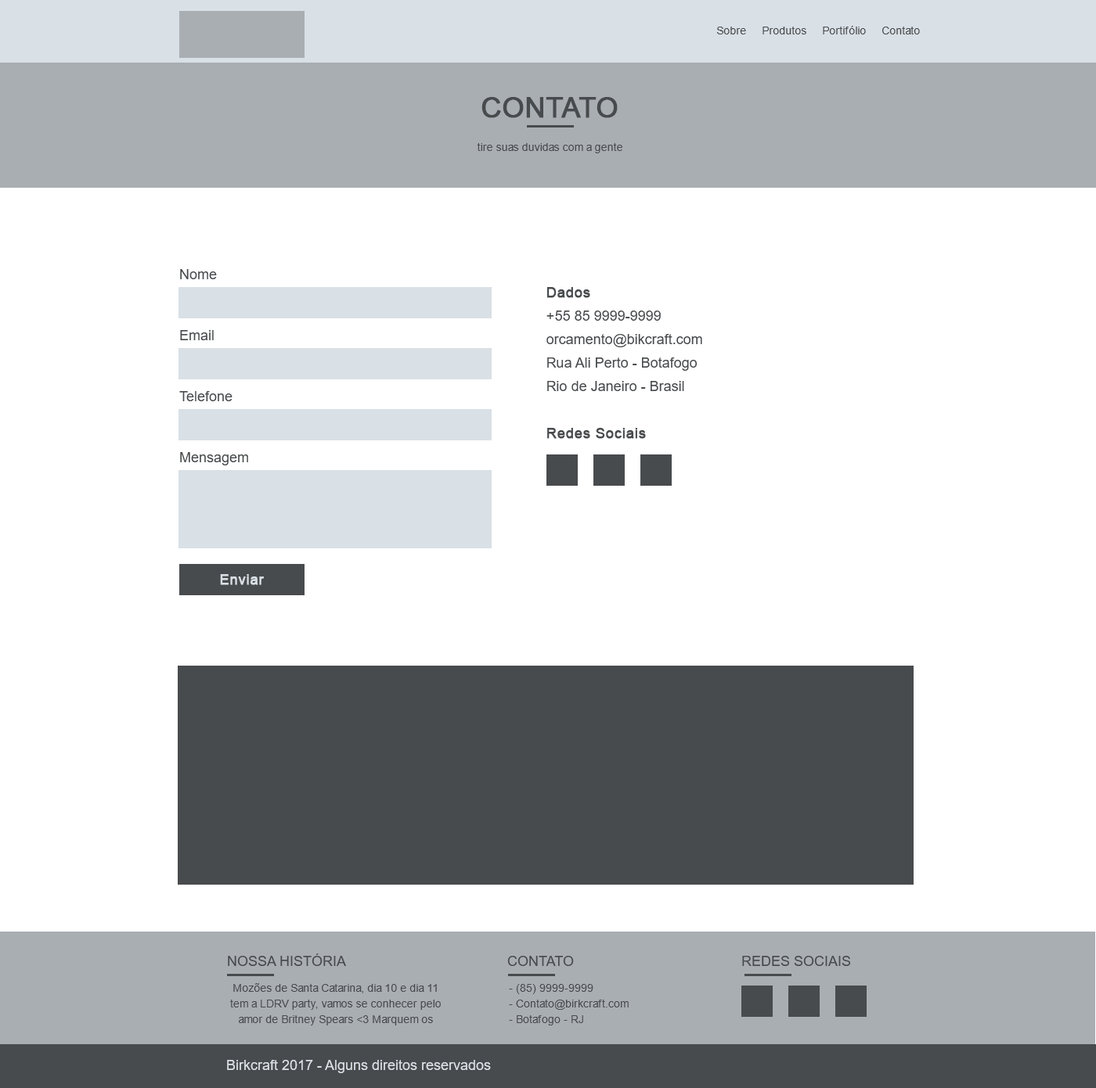
<style>
.page{position:relative;width:1096px;height:1088px;background:#ffffff}
.page>*{position:absolute;margin:0}
.t1{font:11px "ArialMT";color:#484b4d}
.t2{font:28.2px "ArialMT";color:#484b4d;text-transform:uppercase;font-weight:bold}
.t3{font:14.1px "ArialMT";color:#484b4d}
.t4{font:14.1px/23.5px "ArialMT";color:#484b4d}
.t5{font:14.1px/23.5px "ArialMT";color:#484b4d;font-weight:bold}
.t6{font:14.1px "ArialMT";color:#d9e0e6;font-weight:bold}
.t7{font:14.1px "ArialMT";color:#484b4d;text-transform:uppercase}
.t8{font:11px/15.7px "ArialMT";color:#484b4d}
.t9{font:11px/15.7px "ArialMT";color:#d9e0e6}
.t10{font:14.1px "ArialMT";color:#d9e0e6}
</style>
<div class="page">
<p class="t1" style="left:717px;top:26px;width:202px;height:8px">Sobre     Produtos     Portifólio     Contato</p>
<p class="t2" style="left:481px;top:97px;width:136px;height:21px">contato</p>
<p class="t1" style="left:477px;top:143px;width:145px;height:10px">tire suas duvidas com a gente</p>
<p class="t3" style="left:180px;top:269px;width:37px;height:10px">Nome</p>
<p class="t4" style="left:546px;top:287px;width:156px;height:152px"><span class="t5">Dados<br></span>+55 85 9999-9999<br>orcamento@bikcraft.com<br>Rua Ali Perto - Botafogo<br>Rio de Janeiro - Brasil<br><br><span class="t5">Redes Sociais</span></p>
<p class="t3" style="left:180px;top:330px;width:34px;height:10px">Email</p>
<p class="t3" style="left:179px;top:391px;width:53px;height:10px">Telefone</p>
<p class="t3" style="left:180px;top:452px;width:68px;height:14px">Mensagem</p>
<p class="t6" style="left:220px;top:574px;width:44px;height:11px">Enviar</p>
<p class="t7" style="left:228px;top:954px;width:118px;height:12px">Nossa História</p>
<p class="t7" style="left:507px;top:956px;width:67px;height:10px">Contato</p>
<p class="t7" style="left:742px;top:956px;width:108px;height:10px">redes sociais</p>
<p class="t8" style="left:230px;top:984px;width:211px;height:42px;text-align:center">Mozões de Santa Catarina, dia 10 e dia 11 tem a LDRV party, vamos se conhecer pelo amor de Britney Spears &lt;3 Marquem os <span class="t9">amigos de Balneário e Floripa e confirmem presença no evento a</span></p>
<p class="t8" style="left:509px;top:984px;width:119px;height:42px">- (85) 9999-9999<br>- Contato@birkcraft.com<br>- Botafogo - RJ</p>
<p class="t10" style="left:227px;top:1060px;width:264px;height:14px">Birkcraft 2017 - Alguns direitos reservados</p>
</div>
